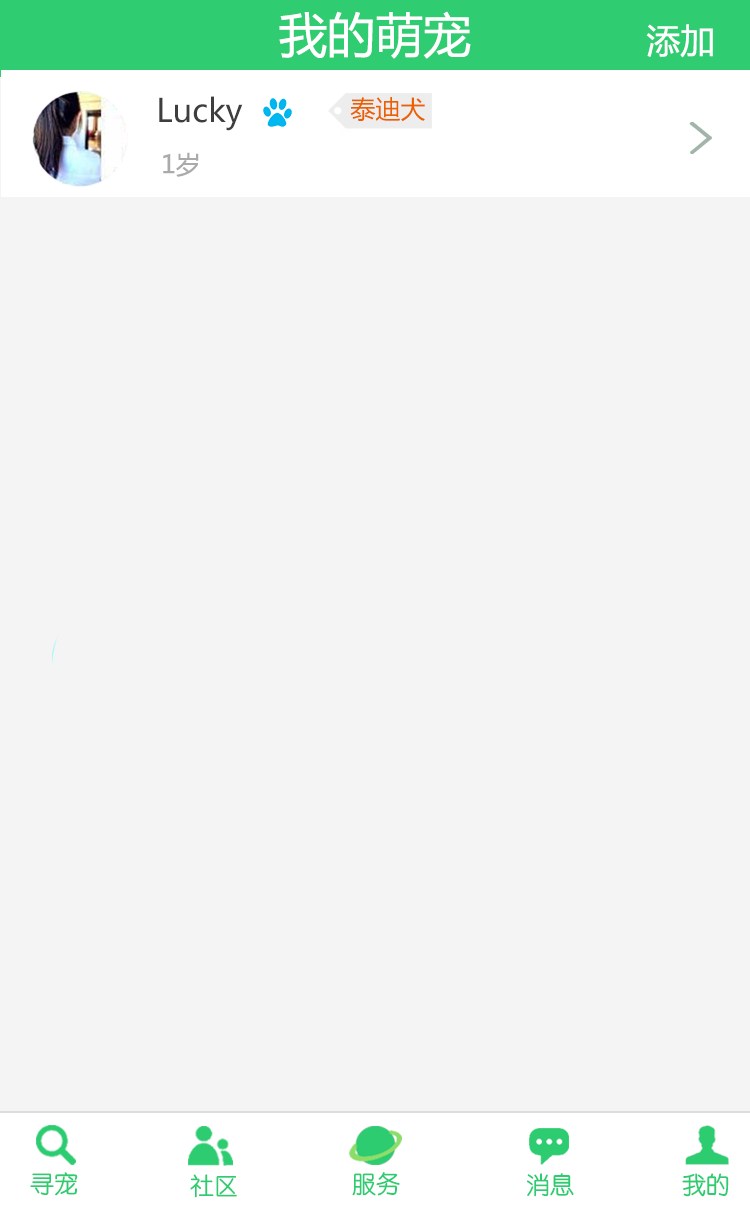
<style>
.page{position:relative;width:750px;height:1206px;background:#f4f4f4}
.page>*{position:absolute;margin:0}
.t1{font:48px "MicrosoftYaHei";color:#ffffff}
.t2{font:34px "MicrosoftYaHei";color:#ffffff}
.t3{font:32px "MicrosoftYaHei";color:#3e3e3e}
.t4{font:25px "MicrosoftYaHei";color:#eb6100}
.t5{font:25px "MicrosoftYaHei";color:#aaaaaa}
.t6{font:24px "STYuanti-SC-Regular";color:#2ecc71}
.t7{font:24px "STYuanti-SC-Regular"}
</style>
<div class="page">
<p class="t1" style="left:279px;top:11px;width:192px;height:48px">我的萌宠</p>
<p class="t2" style="left:646px;top:24px;width:67px;height:34px">添加</p>
<p class="t3" style="left:159px;top:96px;width:84px;height:35px">Lucky</p>
<p class="t4" style="left:350px;top:97px;width:75px;height:25px">泰迪犬</p>
<p class="t5" style="left:163px;top:152px;width:36px;height:25px">1岁</p>
<p class="t6" style="left:30px;top:1172px;width:48px;height:24px">寻宠</p>
<p class="t6" style="left:190px;top:1174px;width:47px;height:24px">社区</p>
<p class="t7" style="left:352px;top:1173px;width:48px;height:24px">服务</p>
<p class="t6" style="left:352px;top:1172px;width:48px;height:24px">服务</p>
<p class="t7" style="left:526px;top:1173px;width:47px;height:24px">消息</p>
<p class="t6" style="left:527px;top:1173px;width:47px;height:24px">消息</p>
<p class="t6" style="left:682px;top:1173px;width:47px;height:24px">我的</p>
<p class="t6" style="left:682px;top:1173px;width:47px;height:24px">我的</p>
</div>
